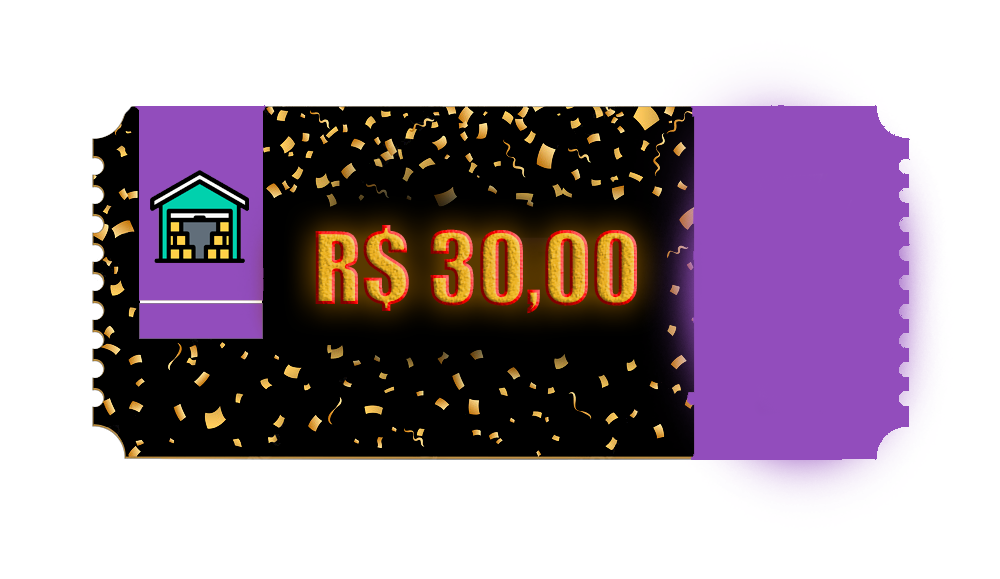
<style>
.page{position:relative;width:1000px;height:579px;background:#ffffff}
.page>*{position:absolute;margin:0}
.t1{font:92px "Impact";text-transform:uppercase}
</style>
<div class="page">
<p class="t1" style="left:315px;top:225px;width:322px;height:89px">r$ 30,00</p>
</div>
